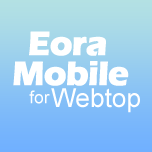
<style>
.page{position:relative;width:152px;height:152px}
.page>*{position:absolute;margin:0}
.t1{font:35px "ErasITC-Bold";letter-spacing:-0.05em;color:#ffffff;font-weight:bold}
.t2{font:26.2px "ArialMT";color:#ffffff}
.t3{font:17.5px "ArialMT";color:#ffffff}
</style>
<div class="page">
<p class="t1" style="left:29px;top:31px;width:77px;height:25px">Eora</p>
<p class="t1" style="left:13px;top:61px;width:116px;height:25px">Mobile</p>
<p class="t2" style="left:51px;top:88px;width:89px;height:25px">Webtop</p>
<p class="t3" style="left:29px;top:90px;width:21px;height:14px">for</p>
</div>
